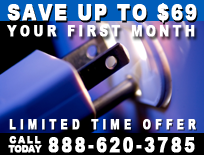
<style>
.page{position:relative;width:204px;height:155px}
.page>*{position:absolute;margin:0}
.t1{font:21.6px "Arial-Black";letter-spacing:0.1em;color:#ffffff;font-weight:bold;scale:0.82 1}
.t2{font:14.7px "Arial-Black";letter-spacing:0.26em;color:#ffffff;font-weight:bold;scale:0.82 1}
.t3{font:13px "Arial-Black";letter-spacing:0.34em;color:#ffffff;font-weight:bold;scale:0.8 1}
.t4{font:9px/9px "Arial-Black";letter-spacing:-0.08em;color:#ffffff;font-weight:bold}
.t5{font:9px/9px "Arial-Black";letter-spacing:0.16em;color:#ffffff;font-weight:bold}
.t6{font:20px "Arial-Black";letter-spacing:0.14em;color:#ffffff;font-weight:bold;scale:0.8 1}
</style>
<div class="page">
<p class="t1" style="left:7px;top:3px;width:190px;height:20px">SAVE UP TO $69</p>
<p class="t2" style="left:7px;top:25px;width:188px;height:12px">YOUR FIRST MONTH</p>
<p class="t3" style="left:9px;top:119px;width:187px;height:11px">LIMITED TIME OFFER</p>
<p class="t4" style="left:8px;top:136px;width:34px;height:17px;text-align:center"><span class="t5">CALL<br></span>TODAY</p>
<p class="t6" style="left:48px;top:137px;width:147px;height:16px">888-620-3785</p>
</div>
